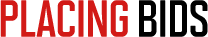
<style>
.page{position:relative;width:208px;height:37px;background:#ffffff}
.page>*{position:absolute;margin:0}
.t1{font:51.9px "Maybe-Bold";letter-spacing:-0.02em;color:#d21a17;text-transform:uppercase}
.t2{font:51.9px "Maybe-Bold";letter-spacing:-0.02em;color:#000000;text-transform:uppercase}
</style>
<div class="page">
<p class="t1" style="left:0px;top:0px;width:208px;height:37px">PLACING <span class="t2">BIDS</span></p>
</div>
